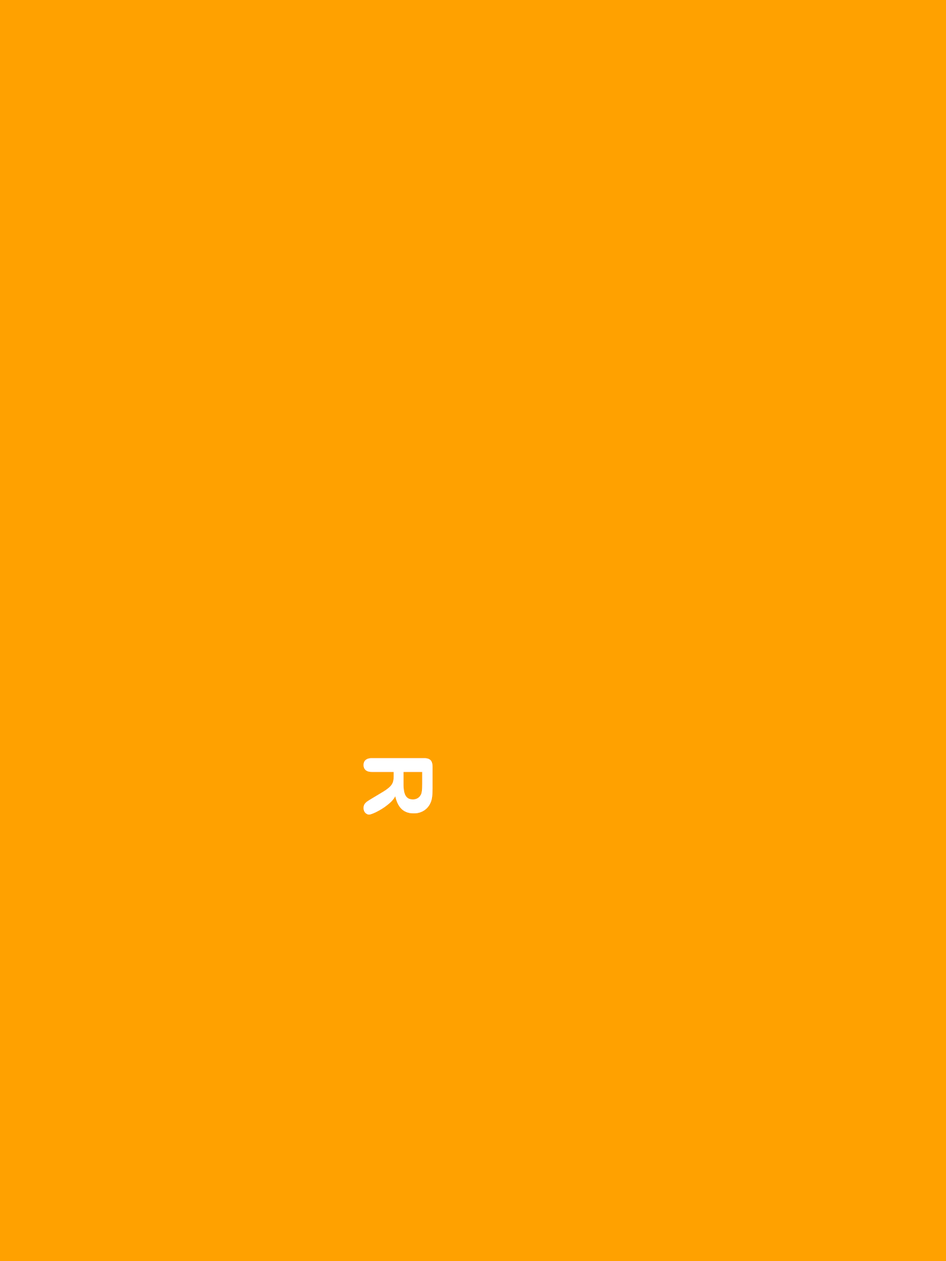
<style>
.page{position:relative;width:946px;height:1261px;background:#ffa100}
.page>*{position:absolute;margin:0}
.t1{font:94.6px "ArialRoundedMTBold";color:#ffffff}
</style>
<div class="page">
<p class="t1" style="left:363px;top:758px;width:69px;height:57px;rotate:90deg">R</p>
</div>
